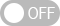
<style>
.page{position:relative;width:60px;height:26px;background:#bababa}
.page>*{position:absolute;margin:0}
.t1{font:16.7px "ArialNarrow";color:#ffffff}
</style>
<div class="page">
<p class="t1" style="left:28px;top:7px;width:27px;height:12px">OFF</p>
</div>
